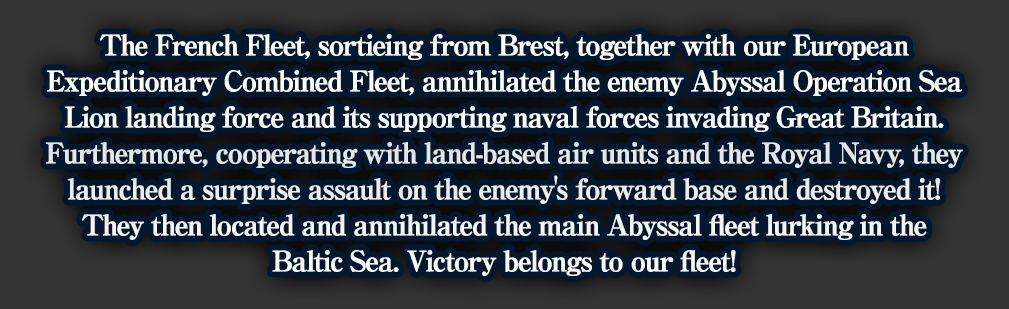
<style>
.page{position:relative;width:1009px;height:309px;background:#03172f}
.page>*{position:absolute;margin:0}
.t1{font:28px/36px "RyuminPro-ExBold";letter-spacing:-0.08em;color:#ffffff;font-weight:bold}
</style>
<div class="page">
<p class="t1" style="left:46px;top:34px;width:917px;height:242px;text-align:center">The French Fleet, sortieing from Brest, together with our European<br>Expeditionary Combined Fleet, annihilated the enemy Abyssal Operation Sea<br>Lion landing force and its supporting naval forces invading Great Britain.<br>Furthermore, cooperating with land-based air units and the Royal Navy, they<br>launched a surprise assault on the enemy's forward base and destroyed it!<br>They then located and annihilated the main Abyssal fleet lurking in the<br>Baltic Sea. Victory belongs to our fleet!</p>
</div>
